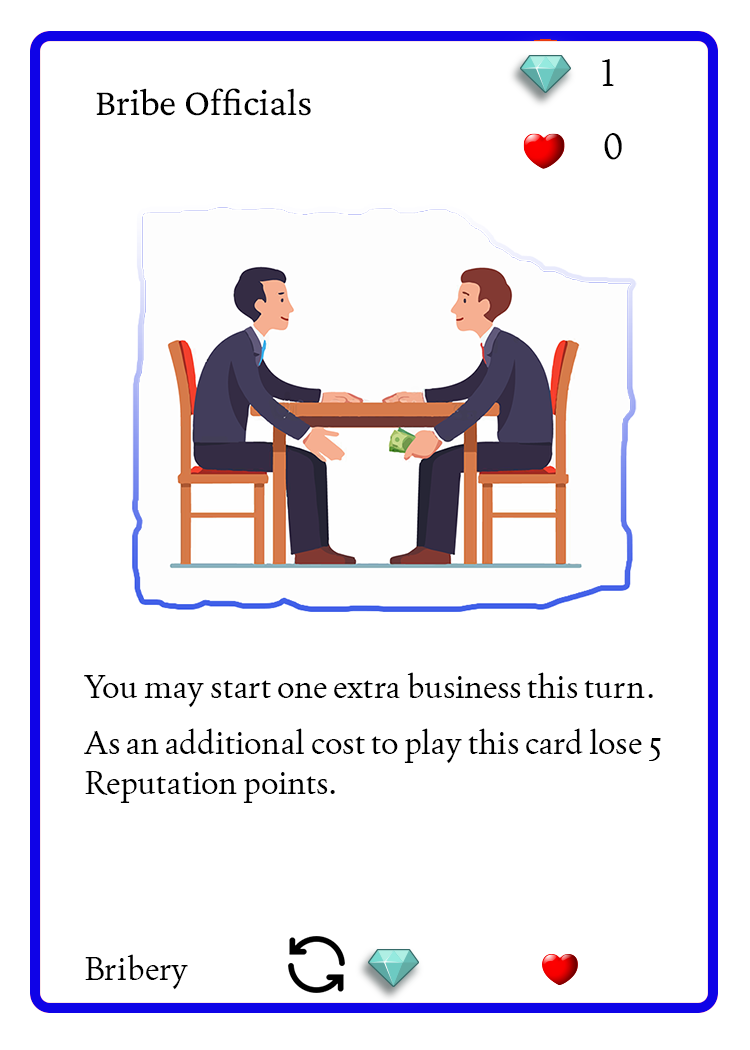
<style>
.page{position:relative;width:750px;height:1050px;background:#ffffff}
.page>*{position:absolute;margin:0}
.t1{font:37.5px "Joan-Regular";color:#000000;text-transform:uppercase}
.t2{font:38.9px "CrimsonPro-Regular";color:#000000}
.t3{font:33.3px "Joan-Regular";color:#000000}
</style>
<div class="page">
<p class="t1" style="left:602px;top:59px;width:12px;height:27px">1</p>
<p class="t2" style="left:96px;top:88px;width:215px;height:28px">Bribe Officials</p>
<p class="t1" style="left:604px;top:133px;width:18px;height:27px">0</p>
<p class="t3" style="left:84px;top:672px;width:577px;height:131px">You may start one extra business this turn.<br>As an additional cost to play this card lose 5 Reputation points.</p>
<p class="t3" style="left:85px;top:954px;width:103px;height:36px">Bribery</p>
</div>
